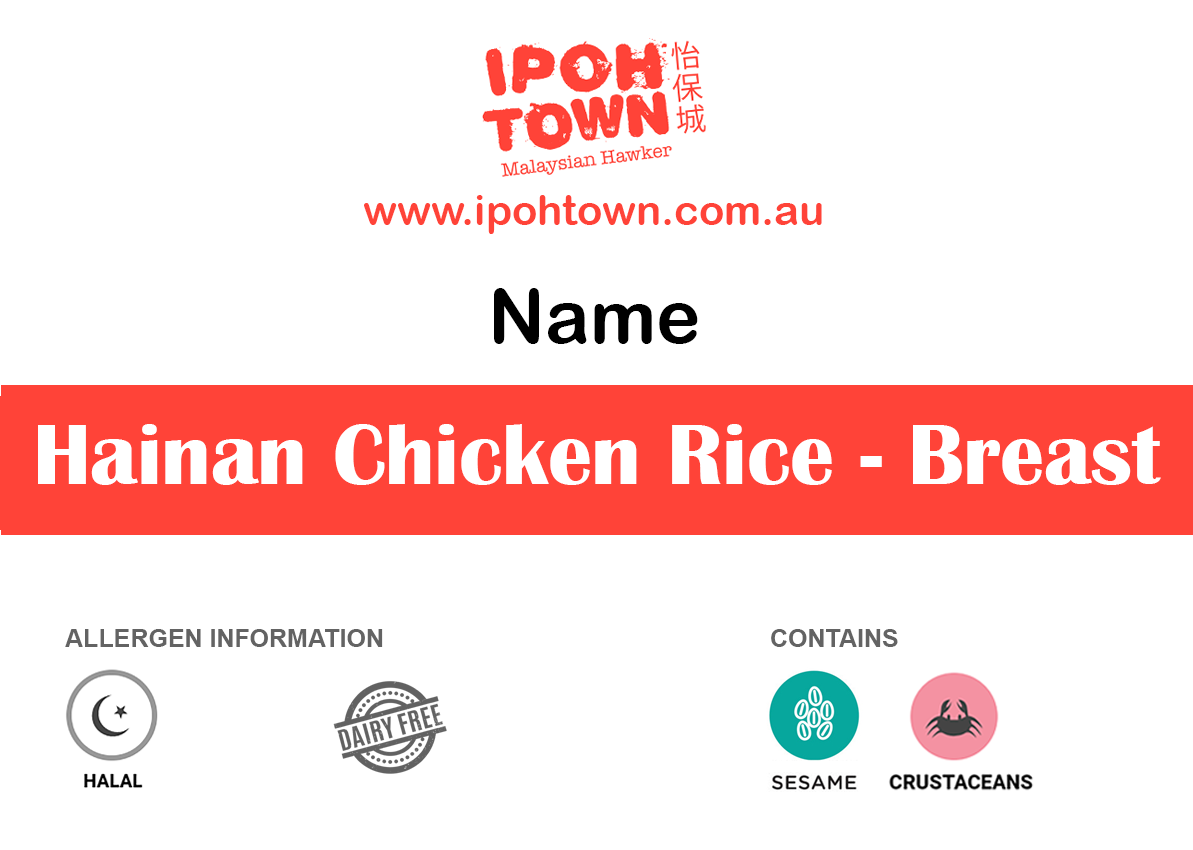
<style>
.page{position:relative;width:1193px;height:850px;background:#ffffff}
.page>*{position:absolute;margin:0}
.t1{font:41.7px "ArialRoundedMTBold";color:#ff4338}
.t2{font:75px "ArialRoundedMTBold";color:#000000}
.t3{font:87.5px "BritannicBold";color:#ffffff}
.t4{font:25px "Arial-BoldMT";color:#636363}
</style>
<div class="page">
<p class="t1" style="left:364px;top:195px;width:458px;height:39px">www.ipohtown.com.au</p>
<p class="t2" style="left:494px;top:288px;width:204px;height:56px">Name</p>
<p class="t3" style="left:38px;top:424px;width:1123px;height:61px">Hainan Chicken Rice - Breast</p>
<p class="t4" style="left:65px;top:629px;width:318px;height:18px">ALLERGEN INFORMATION</p>
<p class="t4" style="left:771px;top:629px;width:127px;height:18px">CONTAINS</p>
</div>
